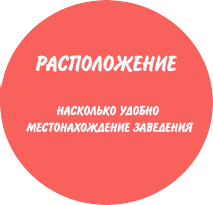
<style>
.page{position:relative;width:213px;height:205px;background:#f8615c}
.page>*{position:absolute;margin:0}
.t1{font:24px "DomCasualNormal";color:#fafafd;text-transform:uppercase;font-style:italic;scale:1.1 1}
.t2{font:14px "DomCasualNormal";color:#fafafd;text-transform:uppercase;font-style:italic;scale:1.1 1}
</style>
<div class="page">
<p class="t1" style="left:36px;top:55px;width:141px;height:17px">расположение</p>
<p class="t2" style="left:26px;top:105px;width:168px;height:28px;text-align:center">насколько удобно <br>местонахождение заведения</p>
</div>
